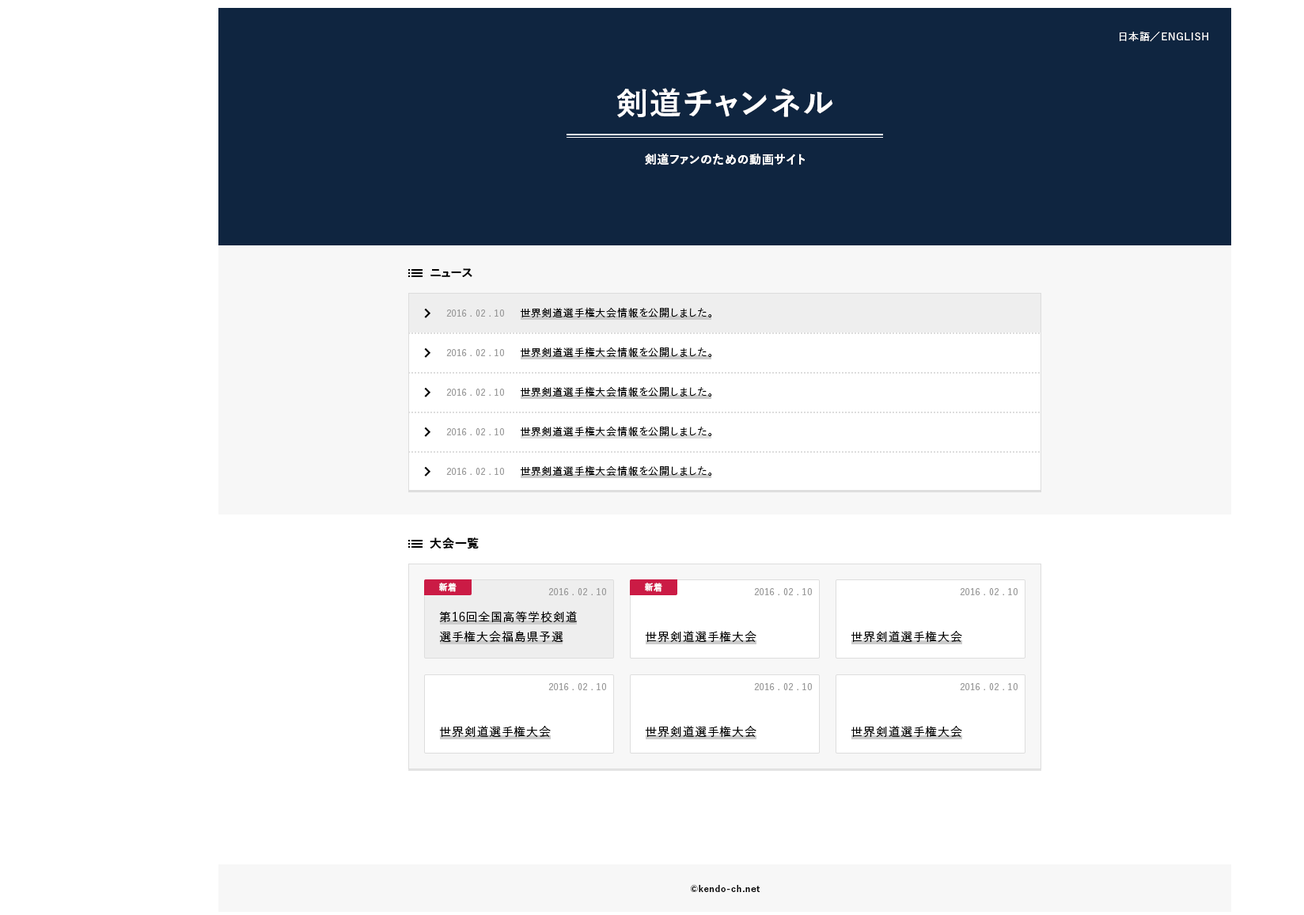
<style>
.page{position:relative;width:1304px;height:915px;background:#ffffff}
.page>*{position:absolute;margin:0}
.t1{font:10.3px "YuGo-Medium";letter-spacing:0.05em;color:#ffffff}
.t2{font:31.6px "YuGo-Bold";letter-spacing:0.05em;color:#ffffff}
.t3{font:11.9px "YuGo-Bold";letter-spacing:0.05em;color:#ffffff}
.t4{font:11.9px "YuGo-Bold";letter-spacing:0.05em;color:#000000}
.t5{font:8.7px "YuGo-Medium";letter-spacing:0.05em;color:#999999}
.t6{font:10.3px "YuGo-Medium";letter-spacing:0.05em;color:#000000}
.t7{font:8.7px "YuGo-Bold";letter-spacing:0.05em;color:#ffffff}
.t8{font:11.9px/19.8px "YuGo-Medium";letter-spacing:0.05em;color:#000000}
.t9{font:11.9px "YuGo-Medium";letter-spacing:0.05em;color:#000000}
.t10{font:8.7px "YuGo-Bold";letter-spacing:0.05em;color:#000000}
</style>
<div class="page">
<p class="t1" style="left:1119px;top:32px;width:89px;height:10px">日本語／ENGLISH</p>
<p class="t2" style="left:616px;top:88px;width:217px;height:30px">剣道チャンネル</p>
<p class="t3" style="left:645px;top:153px;width:160px;height:12px">剣道ファンのための動画サイト</p>
<p class="t4" style="left:430px;top:268px;width:42px;height:9px">ニュース</p>
<p class="t5" style="left:446px;top:309px;width:58px;height:7px">2016 . 02 . 10</p>
<p class="t6" style="left:520px;top:307px;width:192px;height:10px">世界剣道選手権大会情報を公開しました。</p>
<p class="t5" style="left:446px;top:349px;width:58px;height:7px">2016 . 02 . 10</p>
<p class="t6" style="left:520px;top:347px;width:192px;height:10px">世界剣道選手権大会情報を公開しました。</p>
<p class="t5" style="left:446px;top:388px;width:58px;height:8px">2016 . 02 . 10</p>
<p class="t6" style="left:520px;top:386px;width:192px;height:10px">世界剣道選手権大会情報を公開しました。</p>
<p class="t6" style="left:520px;top:426px;width:192px;height:10px">世界剣道選手権大会情報を公開しました。</p>
<p class="t5" style="left:446px;top:428px;width:58px;height:7px">2016 . 02 . 10</p>
<p class="t5" style="left:446px;top:468px;width:58px;height:7px">2016 . 02 . 10</p>
<p class="t6" style="left:520px;top:465px;width:192px;height:10px">世界剣道選手権大会情報を公開しました。</p>
<p class="t4" style="left:430px;top:537px;width:49px;height:12px">大会一覧</p>
<p class="t7" style="left:439px;top:582px;width:17px;height:10px">新着</p>
<p class="t5" style="left:548px;top:588px;width:58px;height:7px">2016 . 02 . 10</p>
<p class="t7" style="left:645px;top:582px;width:17px;height:10px">新着</p>
<p class="t5" style="left:754px;top:588px;width:58px;height:7px">2016 . 02 . 10</p>
<p class="t5" style="left:960px;top:588px;width:57px;height:7px">2016 . 02 . 10</p>
<p class="t8" style="left:439px;top:611px;width:139px;height:31px">第16回全国高等学校剣道<br>選手権大会福島県予選</p>
<p class="t9" style="left:645px;top:631px;width:111px;height:11px">世界剣道選手権大会</p>
<p class="t9" style="left:850px;top:631px;width:112px;height:11px">世界剣道選手権大会</p>
<p class="t5" style="left:548px;top:683px;width:58px;height:7px">2016 . 02 . 10</p>
<p class="t5" style="left:754px;top:683px;width:58px;height:7px">2016 . 02 . 10</p>
<p class="t5" style="left:960px;top:683px;width:57px;height:7px">2016 . 02 . 10</p>
<p class="t9" style="left:439px;top:725px;width:112px;height:12px">世界剣道選手権大会</p>
<p class="t9" style="left:645px;top:725px;width:111px;height:12px">世界剣道選手権大会</p>
<p class="t9" style="left:850px;top:725px;width:112px;height:12px">世界剣道選手権大会</p>
<p class="t10" style="left:691px;top:885px;width:69px;height:7px">©kendo-ch.net</p>
</div>
